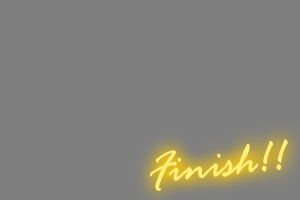
<style>
.page{position:relative;width:300px;height:200px;background:#7f7f7f}
.page>*{position:absolute;margin:0}
.t1{font:48px "RageItalicLetPlain";color:#ffee7a}
</style>
<div class="page">
<p class="t1" style="left:150px;top:139px;width:138px;height:52px;rotate:-6deg">Finish!!</p>
</div>
